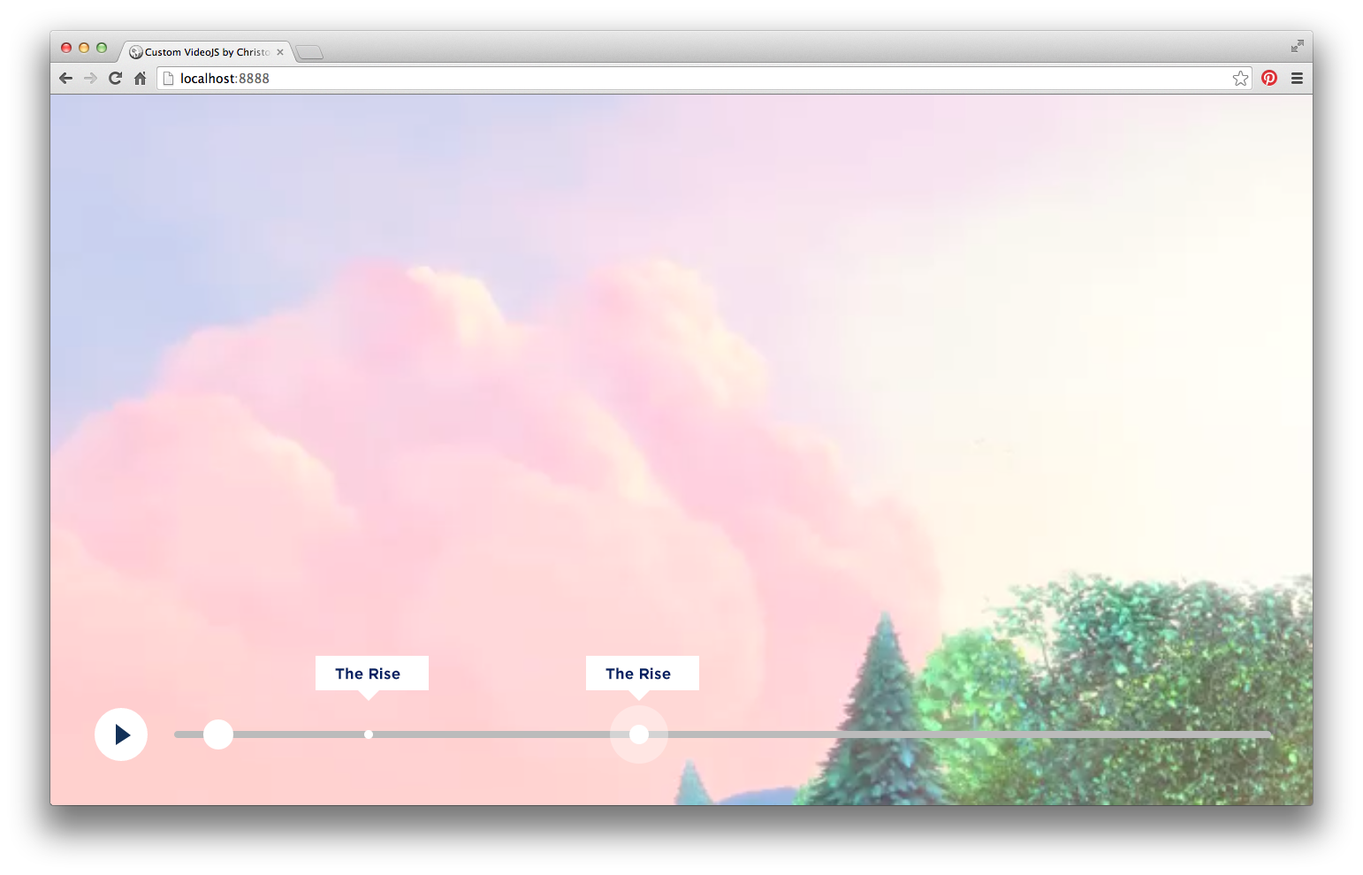
<style>
.page{position:relative;width:1363px;height:875px}
.page>*{position:absolute;margin:0}
.t1{font:15.2px "Gotham-Bold";color:#032163}
</style>
<div class="page">
<p class="t1" style="left:335px;top:667px;width:65px;height:13px">The Rise</p>
<p class="t1" style="left:605px;top:667px;width:66px;height:13px">The Rise</p>
</div>
